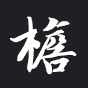
<style>
.page{position:relative;width:88px;height:88px;background:#1f2024}
.page>*{position:absolute;margin:0}
.t1{font:69.1px "Fzikai";color:#ffffff;font-weight:bold}
</style>
<div class="page">
<p class="t1" style="left:10px;top:16px;width:67px;height:59px">檐</p>
</div>
